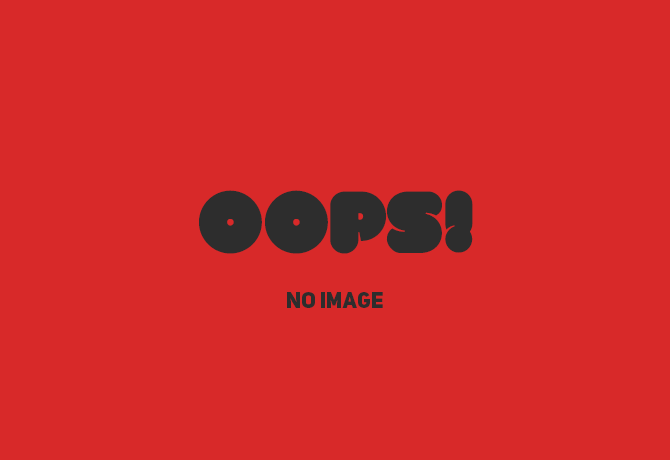
<style>
.page{position:relative;width:670px;height:460px;background:#d82929}
.page>*{position:absolute;margin:0}
.t1{font:86.7px "VAL";color:#2d2d2d}
.t2{font:22px "UniSansHeavyCAPS";color:#2d2d2d}
</style>
<div class="page">
<p class="t1" style="left:199px;top:190px;width:274px;height:64px">Oops!</p>
<p class="t2" style="left:287px;top:292px;width:96px;height:16px">No IMAGE</p>
</div>
